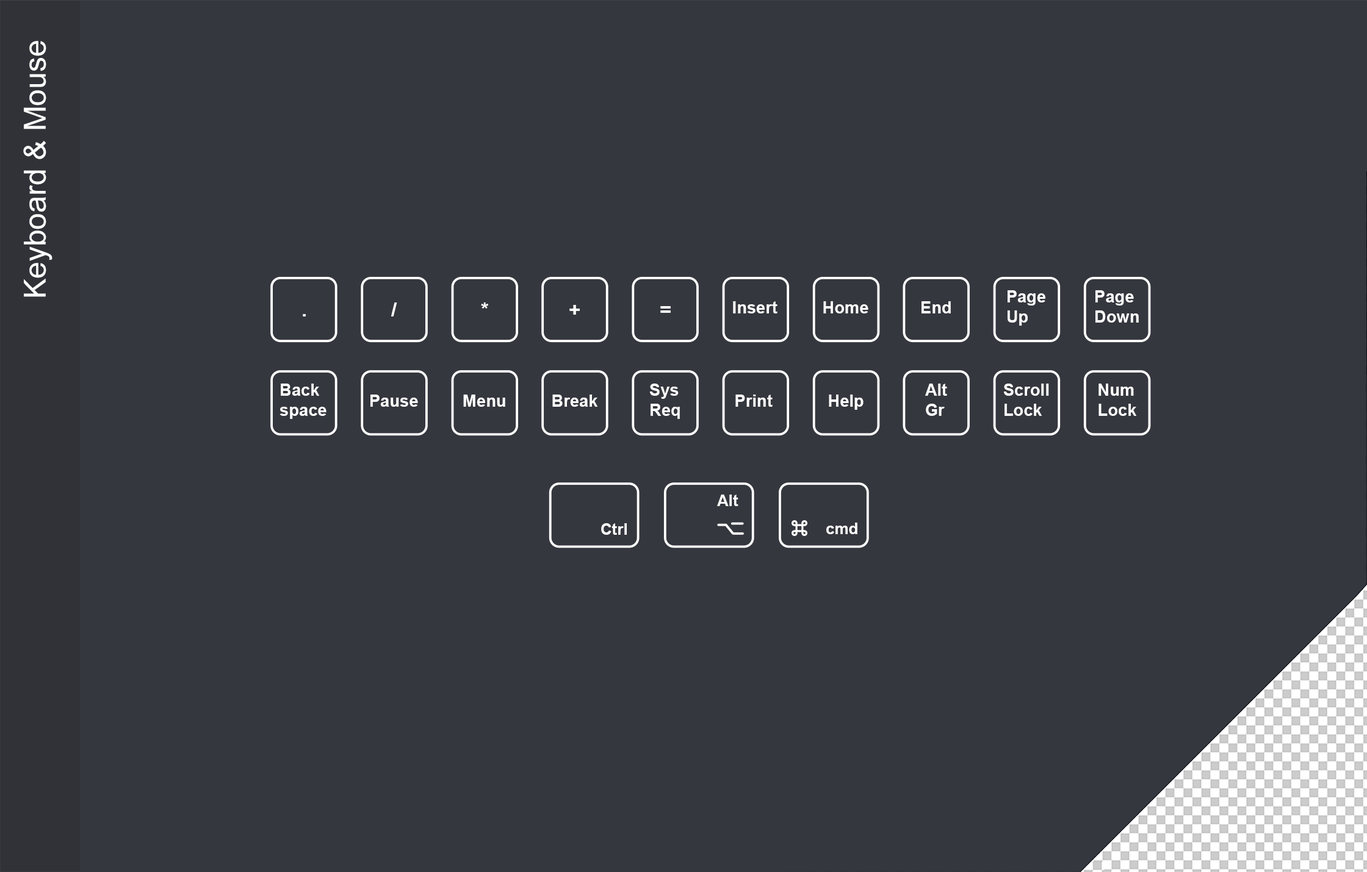
<style>
.page{position:relative;width:1367px;height:872px;background:#35373e}
.page>*{position:absolute;margin:0}
.t1{font:30.5px "ArialMT";color:#ffffff}
.t2{font:16.7px/19.8px "Arial-BoldMT";color:#ffffff}
.t3{font:19.8px "Arial-BoldMT";color:#ffffff}
.t4{font:16.7px "Arial-BoldMT";color:#ffffff}
.t5{font:15.8px "Arial-BoldMT";color:#ffffff}
</style>
<div class="page">
<p class="t1" style="left:23px;top:41px;width:29px;height:256px;rotate:-90deg">Keyboard &amp; Mouse</p>
<p class="t2" style="left:1007px;top:290px;width:38px;height:36px">Page<br>Up</p>
<p class="t2" style="left:1095px;top:290px;width:44px;height:33px">Page<br>Down</p>
<p class="t3" style="left:391px;top:303px;width:6px;height:14px">/</p>
<p class="t3" style="left:481px;top:303px;width:7px;height:6px">*</p>
<p class="t3" style="left:569px;top:305px;width:11px;height:10px">+</p>
<p class="t4" style="left:733px;top:301px;width:44px;height:13px">Insert</p>
<p class="t4" style="left:823px;top:301px;width:45px;height:13px">Home</p>
<p class="t4" style="left:921px;top:301px;width:30px;height:13px">End</p>
<p class="t3" style="left:303px;top:314px;width:3px;height:3px">.</p>
<p class="t3" style="left:660px;top:306px;width:11px;height:7px">=</p>
<p class="t2" style="left:279px;top:384px;width:47px;height:35px">Back<br>space</p>
<p class="t2" style="left:649px;top:384px;width:31px;height:35px">Sys<br>Req</p>
<p class="t2" style="left:925px;top:384px;width:22px;height:32px">Alt<br>Gr</p>
<p class="t2" style="left:1003px;top:384px;width:46px;height:32px">Scroll<br>Lock</p>
<p class="t2" style="left:1098px;top:384px;width:38px;height:32px">Num<br>Lock</p>
<p class="t4" style="left:370px;top:395px;width:48px;height:12px">Pause</p>
<p class="t4" style="left:463px;top:395px;width:42px;height:12px">Menu</p>
<p class="t4" style="left:552px;top:395px;width:45px;height:12px">Break</p>
<p class="t4" style="left:735px;top:395px;width:37px;height:12px">Print</p>
<p class="t4" style="left:829px;top:395px;width:34px;height:15px">Help</p>
<p class="t5" style="left:717px;top:495px;width:21px;height:11px">Alt</p>
<p class="t5" style="left:601px;top:523px;width:26px;height:12px">Ctrl</p>
<p class="t5" style="left:826px;top:523px;width:31px;height:11px">cmd</p>
</div>
